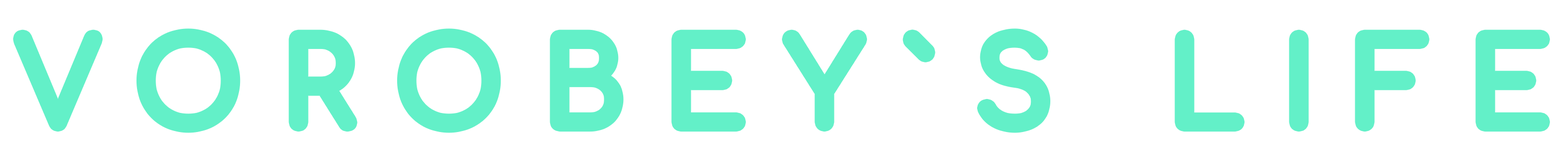
<style>
.page{position:relative;width:1568px;height:164px;background:#ffffff}
.page>*{position:absolute;margin:0}
.t1{font:116.9px "Comfortaa-Regular";letter-spacing:0.32em;color:#63f0c8;font-weight:bold}
</style>
<div class="page">
<p class="t1" style="left:18px;top:33px;width:1527px;height:95px">VOROBEY`S LIFE</p>
</div>
